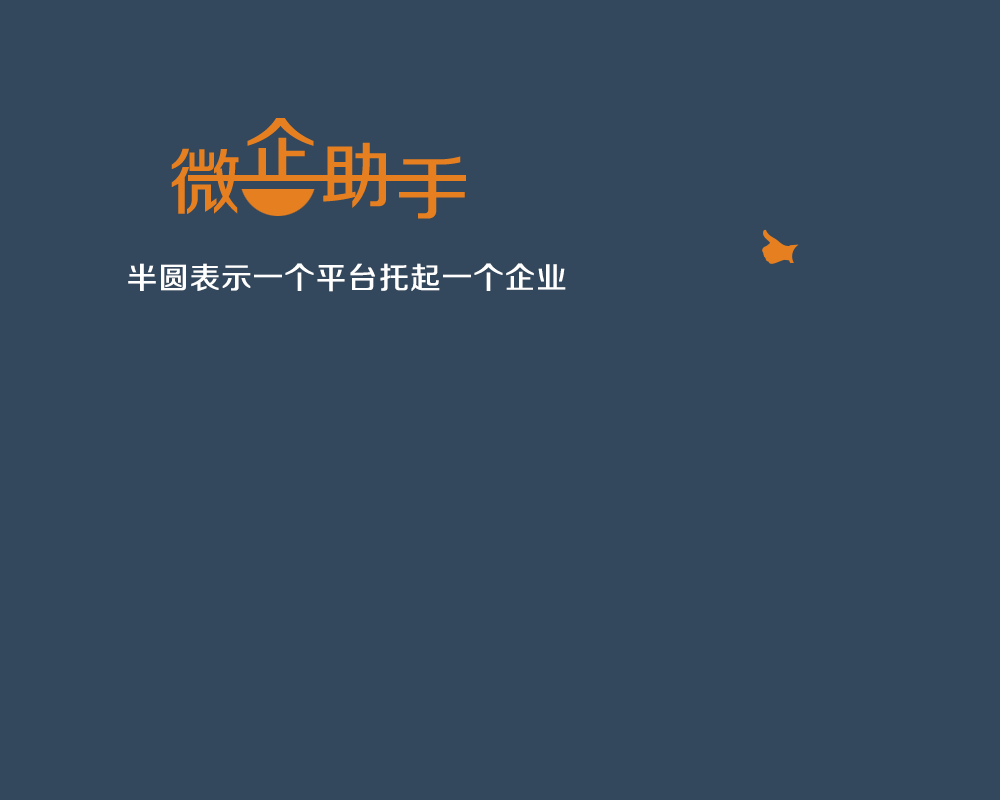
<style>
.page{position:relative;width:1000px;height:800px;background:#33485d}
.page>*{position:absolute;margin:0}
.t1{font:30px "FZZZHUNHJW--GB1-0";letter-spacing:0.05em;color:#ffffff}
</style>
<div class="page">
<p class="t1" style="left:128px;top:263px;width:438px;height:29px">半圆表示一个平台托起一个企业</p>
</div>
